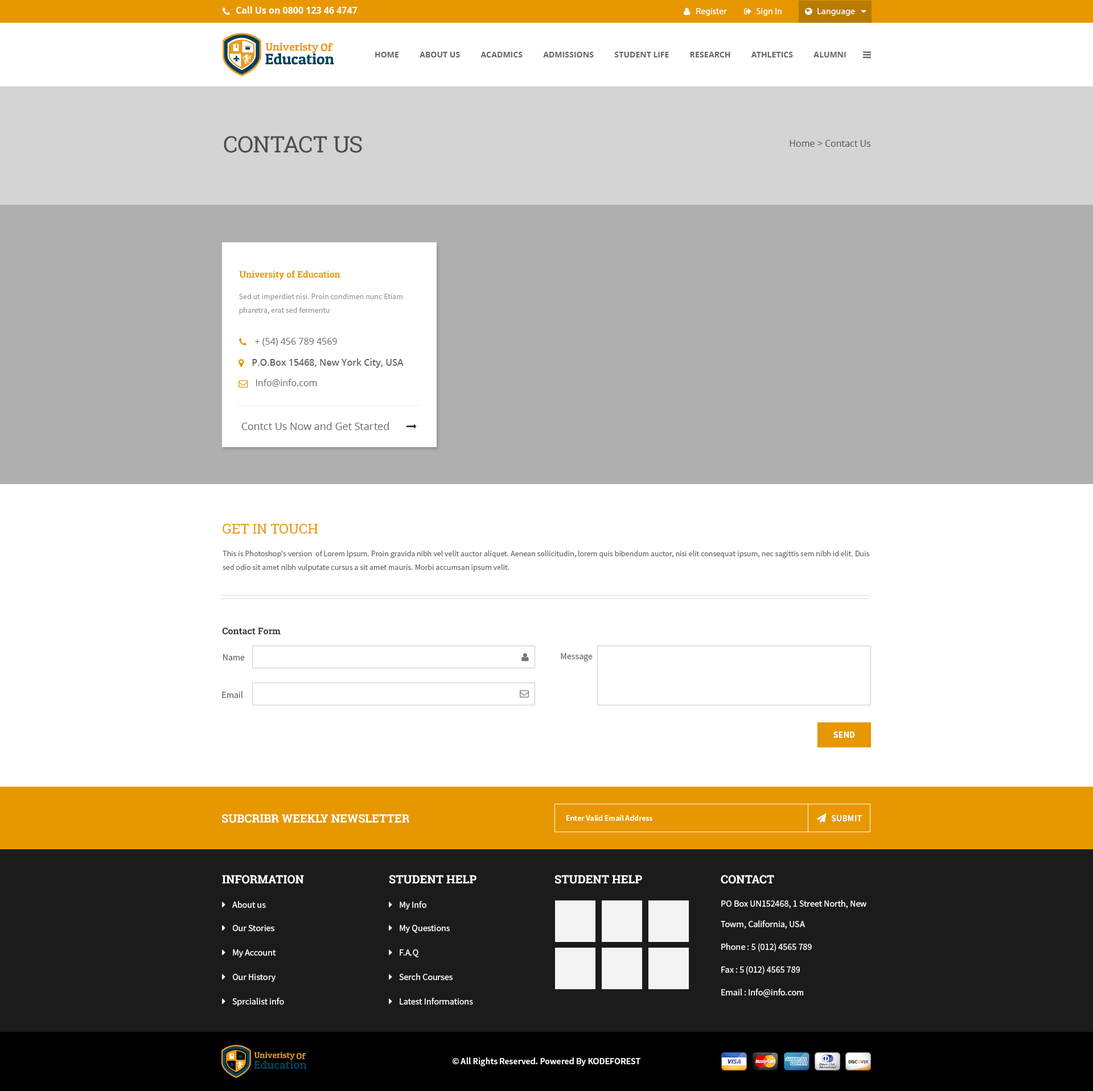
<style>
.page{position:relative;width:1093px;height:1091px;background:#ffffff}
.page>*{position:absolute;margin:0}
.t1{font:9.1px "OpenSans-Bold";color:#ffffff}
.t2{font:9.1px "MyriadPro-Regular";color:#ffffff}
.t3{font:8px "OpenSans-Bold";color:#666666;text-transform:uppercase}
.t4{font:22.8px "RobotoSlab-Regular";color:#4d4d4d;text-transform:uppercase}
.t5{font:9.1px "OpenSans";color:#4d4d4d}
.t6{font:9.1px "RobotoSlab-Bold";color:#e79800}
.t7{font:8px/13.7px "SourceSansPro-Regular";color:#999999}
.t8{font:9.1px "OpenSans";color:#666666}
.t9{font:9.1px "OpenSans-Semibold";color:#666666}
.t10{font:13.7px "RobotoSlab-Regular";color:#e79800;text-transform:uppercase}
.t11{font:8px/13.7px "SourceSansPro-Regular";color:#666666}
.t12{font:9.1px "RobotoSlab-Bold";color:#333333}
.t13{font:9.1px "SourceSansPro-Regular";color:#666666}
.t14{font:9.1px "SourceSansPro-Bold";color:#ffffff;text-transform:uppercase}
.t15{font:11.4px "RobotoSlab-Bold";color:#ffffff;text-transform:uppercase}
.t16{font:8px "SourceSansPro-Semibold";color:#ffffff}
.t17{font:9.1px "SourceSansPro-Semibold";color:#ffffff}
.t18{font:9.1px "SourceSansPro-Regular";color:#ffffff}
.t19{font:9.1px/20.5px "SourceSansPro-Regular";color:#ffffff}
</style>
<div class="page">
<p class="t1" style="left:236px;top:6px;width:121px;height:8px">Call Us on 0800 123 46 4747</p>
<p class="t2" style="left:696px;top:8px;width:31px;height:8px">Register</p>
<p class="t2" style="left:756px;top:8px;width:25px;height:8px">Sign In</p>
<p class="t2" style="left:817px;top:8px;width:38px;height:8px">Language</p>
<p class="t3" style="left:375px;top:52px;width:471px;height:5px">Home          About Us          ACADMICS          ADMISSIONS          STUDENT LIFE          RESEARCH          ATHLETICS          ALUMNI</p>
<p class="t4" style="left:224px;top:136px;width:138px;height:17px">Contact Us</p>
<p class="t5" style="left:789px;top:140px;width:82px;height:7px">Home &gt; Contact Us</p>
<p class="t6" style="left:239px;top:270px;width:101px;height:10px">University of Education</p>
<p class="t7" style="left:239px;top:294px;width:163px;height:21px;text-align:right">Sed ut imperdiet nisi. Proin condimen nunc Etiam pharetra, erat sed fermentu</p>
<p class="t8" style="left:255px;top:338px;width:82px;height:9px">+ (54) 456 789 4569</p>
<p class="t9" style="left:252px;top:358px;width:151px;height:10px">P.O.Box 15468, New York City, USA</p>
<p class="t8" style="left:256px;top:379px;width:61px;height:8px">Info@info.com</p>
<p class="t10" style="left:222px;top:524px;width:96px;height:10px">Get In Touch</p>
<p class="t11" style="left:222px;top:551px;width:647px;height:21px">This is Photoshop's version  of Lorem Ipsum. Proin gravida nibh vel velit auctor aliquet. Aenean sollicitudin, lorem quis bibendum auctor, nisi elit consequat ipsum, nec sagittis sem nibh id elit. Duis sed odio sit amet nibh vulputate cursus a sit amet mauris. Morbi accumsan ipsum velit.</p>
<p class="t12" style="left:222px;top:628px;width:59px;height:7px">Contact Form</p>
<p class="t13" style="left:561px;top:653px;width:31px;height:9px">Message</p>
<p class="t13" style="left:223px;top:654px;width:22px;height:7px">Name</p>
<p class="t13" style="left:222px;top:691px;width:21px;height:7px">Email</p>
<p class="t14" style="left:833px;top:732px;width:21px;height:6px">Send</p>
<p class="t15" style="left:222px;top:814px;width:187px;height:9px">subcribr weekly newsletter</p>
<p class="t16" style="left:566px;top:815px;width:86px;height:6px">Enter Valid Email Address</p>
<p class="t17" style="left:831px;top:815px;width:31px;height:7px">SUBMIT</p>
<p class="t15" style="left:222px;top:875px;width:82px;height:9px">INFORMATION</p>
<p class="t15" style="left:389px;top:875px;width:87px;height:9px">student help</p>
<p class="t15" style="left:555px;top:875px;width:87px;height:9px">student help</p>
<p class="t15" style="left:720px;top:875px;width:54px;height:9px">Contact</p>
<p class="t18" style="left:232px;top:901px;width:34px;height:7px">About us</p>
<p class="t18" style="left:399px;top:901px;width:27px;height:9px">My Info</p>
<p class="t19" style="left:720px;top:900px;width:146px;height:29px;text-align:right">PO Box UN152468, 1 Street North, New Towm, California, USA</p>
<p class="t18" style="left:233px;top:925px;width:41px;height:7px">Our Stories</p>
<p class="t18" style="left:399px;top:925px;width:51px;height:8px">My Questions</p>
<p class="t18" style="left:233px;top:950px;width:43px;height:8px">My Account</p>
<p class="t18" style="left:399px;top:950px;width:19px;height:8px">F.A.Q</p>
<p class="t18" style="left:721px;top:943px;width:90px;height:9px">Phone : 5 (012) 4565 789</p>
<p class="t18" style="left:233px;top:974px;width:42px;height:8px">Our History</p>
<p class="t18" style="left:399px;top:974px;width:53px;height:6px">Serch Courses</p>
<p class="t18" style="left:721px;top:966px;width:78px;height:9px">Fax : 5 (012) 4565 789</p>
<p class="t18" style="left:721px;top:989px;width:82px;height:9px">Email : Info@info.com</p>
<p class="t18" style="left:232px;top:998px;width:52px;height:9px">Sprcialist info</p>
<p class="t18" style="left:399px;top:998px;width:74px;height:7px">Latest Informations</p>
<p class="t17" style="left:452px;top:1058px;width:188px;height:9px">© All Rights Reserved. Powered By KODEFOREST</p>
</div>
